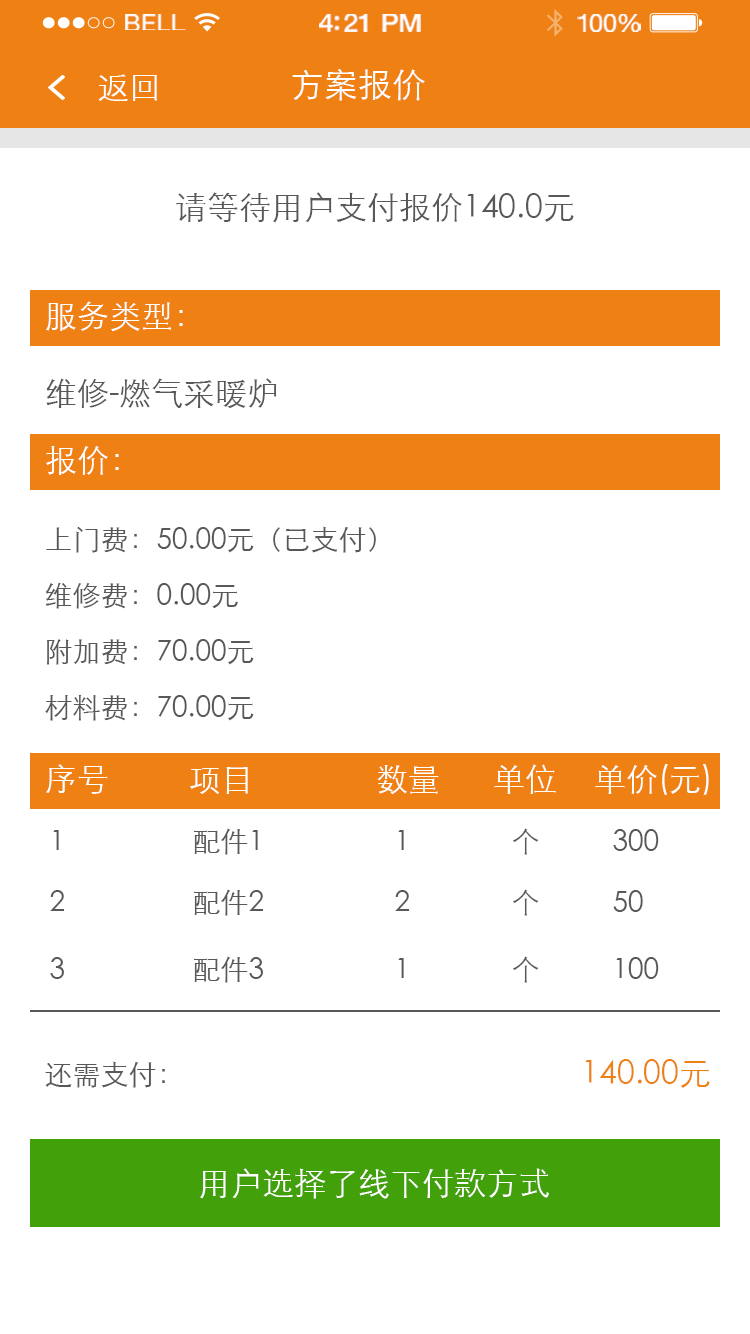
<style>
.page{position:relative;width:750px;height:1334px;background:#ffffff}
.page>*{position:absolute;margin:0}
.t1{font:23.3px "HelveticaNeue";letter-spacing:0.02em;color:#ffffff;scale:1.06 1}
.t2{font:25.3px "HelveticaNeue-Medium";letter-spacing:-0.02em;color:#ffffff;scale:1.06 1}
.t3{font:24.3px "HelveticaNeue";letter-spacing:-0.02em;color:#ffffff;scale:1.06 1}
.t4{font:32px "STXihei";color:#ffffff}
.t5{font:34px "STXihei";color:#ffffff}
.t6{font:32px "STXihei";color:#595757}
.t7{font:28px/56px "STXihei";color:#595757}
.t8{font:28px "STXihei";color:#595757}
.t9{font:32px "STXihei";color:#ef8013}
</style>
<div class="page">
<p class="t1" style="left:125px;top:14px;width:61px;height:16px">BELL</p>
<p class="t2" style="left:319px;top:14px;width:102px;height:18px">4:21 PM</p>
<p class="t3" style="left:577px;top:14px;width:64px;height:18px">100%</p>
<p class="t4" style="left:98px;top:74px;width:59px;height:27px">返回</p>
<p class="t5" style="left:292px;top:69px;width:133px;height:32px">方案报价</p>
<p class="t6" style="left:176px;top:192px;width:398px;height:31px">请等待用户支付报价140.0元</p>
<p class="t4" style="left:46px;top:301px;width:137px;height:31px">服务类型：</p>
<p class="t6" style="left:46px;top:378px;width:231px;height:31px">维修-燃气采暖炉</p>
<p class="t4" style="left:46px;top:446px;width:73px;height:29px">报价：</p>
<p class="t7" style="left:45px;top:526px;width:331px;height:195px">上门费：50.00元（已支付）<br>维修费：0.00元<br>附加费：70.00元<br>材料费：70.00元</p>
<p class="t4" style="left:46px;top:764px;width:62px;height:30px">序号</p>
<p class="t4" style="left:190px;top:767px;width:58px;height:27px">项目</p>
<p class="t4" style="left:377px;top:765px;width:62px;height:29px">数量</p>
<p class="t4" style="left:494px;top:764px;width:62px;height:30px">单位</p>
<p class="t4" style="left:595px;top:764px;width:114px;height:31px">单价(元)</p>
<p class="t8" style="left:53px;top:830px;width:6px;height:20px">1</p>
<p class="t8" style="left:193px;top:828px;width:65px;height:27px">配件1</p>
<p class="t8" style="left:398px;top:830px;width:6px;height:20px">1</p>
<p class="t8" style="left:513px;top:828px;width:26px;height:27px">个</p>
<p class="t8" style="left:613px;top:829px;width:46px;height:22px">300</p>
<p class="t8" style="left:50px;top:890px;width:15px;height:21px">2</p>
<p class="t8" style="left:193px;top:889px;width:71px;height:27px">配件2</p>
<p class="t8" style="left:395px;top:890px;width:15px;height:21px">2</p>
<p class="t8" style="left:513px;top:889px;width:26px;height:27px">个</p>
<p class="t8" style="left:613px;top:890px;width:30px;height:22px">50</p>
<p class="t8" style="left:50px;top:957px;width:14px;height:22px">3</p>
<p class="t8" style="left:193px;top:956px;width:70px;height:27px">配件3</p>
<p class="t8" style="left:398px;top:958px;width:6px;height:20px">1</p>
<p class="t8" style="left:513px;top:956px;width:26px;height:27px">个</p>
<p class="t8" style="left:616px;top:957px;width:43px;height:22px">100</p>
<p class="t8" style="left:45px;top:1061px;width:120px;height:27px">还需支付：</p>
<p class="t9" style="left:585px;top:1059px;width:125px;height:29px">140.00元</p>
<p class="t4" style="left:200px;top:1168px;width:349px;height:31px">用户选择了线下付款方式</p>
</div>
